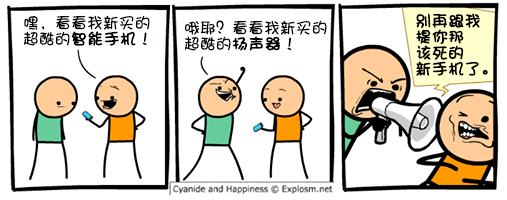
<style>
.page{position:relative;width:507px;height:200px;background:#ffffff}
.page>*{position:absolute;margin:0}
.t1{font:16px/16px "DFShaoNvW5";color:#000000}
.t2{font:16px/16px "DFShaoNvW5";color:#000000;font-weight:bold}
</style>
<div class="page">
<p class="t1" style="left:23px;top:15px;width:127px;height:31px">嘿，看看我新买的<br>超酷的<span class="t2">智能手机</span>！</p>
<p class="t2" style="left:416px;top:13px;width:72px;height:63px">别再跟我<br>提你那<br>该死的<br>新手机了。</p>
<p class="t1" style="left:184px;top:20px;width:143px;height:31px">哦耶？看看我新买的<br>超酷的<span class="t2">扬声器</span>！</p>
</div>
